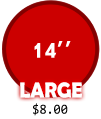
<style>
.page{position:relative;width:101px;height:119px;background:#cc0000}
.page>*{position:absolute;margin:0}
.t1{font:21.9px "BerlinSansFBDemi-Bold";color:#ffffff;scale:0.92 1}
.t2{font:14px "Consolas";color:#000000;scale:0.92 1}
</style>
<div class="page">
<p class="t1" style="left:20px;top:82px;width:62px;height:16px">LARGE</p>
<p class="t2" style="left:33px;top:103px;width:35px;height:13px">$8.00</p>
</div>
